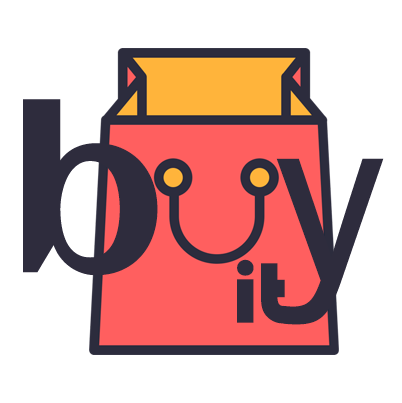
<style>
.page{position:relative;width:402px;height:403px;background:#ffffff}
.page>*{position:absolute;margin:0}
.t1{font:224px "Aclonica-Regular";letter-spacing:0.02em;color:#2e2c3d}
.t2{font:231px "AcuminConcept-Regular";letter-spacing:0.02em;color:#2e2c3d}
.t3{font:89px "Bauhaus93";color:#2e2c3d}
</style>
<div class="page">
<p class="t1" style="left:23px;top:99px;width:135px;height:177px">b</p>
<p class="t2" style="left:276px;top:158px;width:108px;height:167px">y</p>
<p class="t3" style="left:237px;top:259px;width:48px;height:65px">it</p>
</div>
